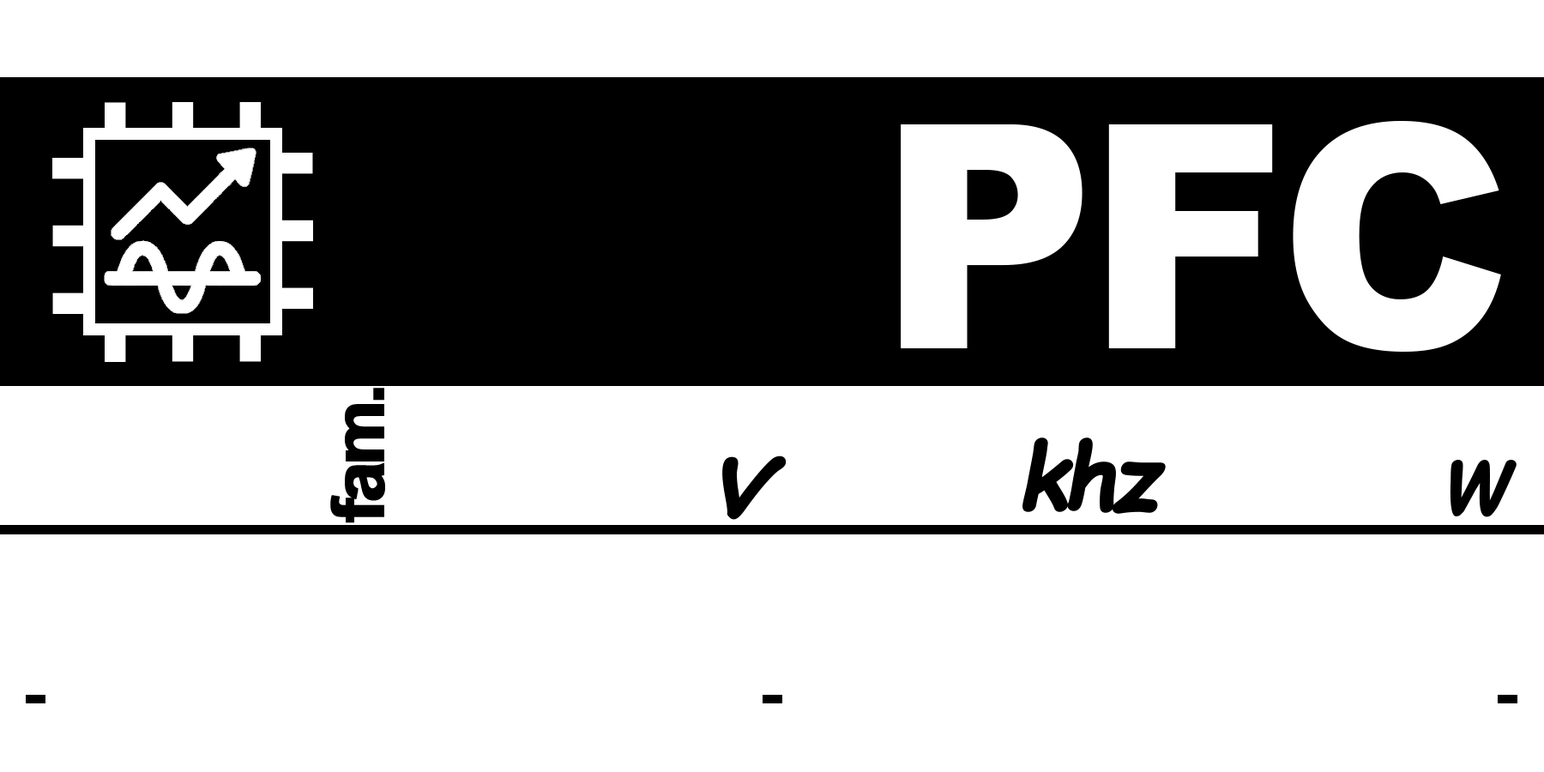
<style>
.page{position:relative;width:1544px;height:772px;background:#ffffff}
.page>*{position:absolute;margin:0}
.t1{font:313.3px "Arial-Black";letter-spacing:-0.025em;color:#ffffff;scale:0.95 1}
.t2{font:72.6px "Arial-BoldMT";letter-spacing:-0.075em;color:#000000;font-weight:bold}
.t3{font:90.8px "ComicSansMS-Bold";letter-spacing:-0.075em;color:#000000;font-weight:bold;font-style:italic}
.t4{font:90.8px "ComicSansMS-Bold";letter-spacing:-0.075em;color:#000000;font-style:italic}
.t5{font:109px "SegoePrint-Bold";letter-spacing:-0.15em;color:#000000;font-weight:bold;font-style:italic}
.t6{font:102px "ComicSansMS";letter-spacing:-0.075em;color:#000000;font-weight:bold;font-style:italic}
</style>
<div class="page">
<p class="t1" style="left:901px;top:121px;width:600px;height:231px">PFC</p>
<p class="t2" style="left:330px;top:388px;width:55px;height:135px;rotate:-90deg">fam.</p>
<p class="t3" style="left:1023px;top:438px;width:143px;height:76px"><span class="t4"> </span>khz</p>
<p class="t5" style="left:722px;top:456px;width:65px;height:64px">v</p>
<p class="t6" style="left:1450px;top:460px;width:67px;height:57px">w</p>
</div>
